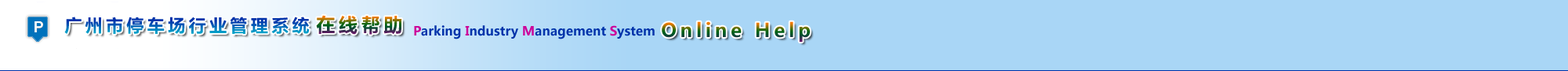
<style>
.page{position:relative;width:1568px;height:71px;background:#a9d6f6}
.page>*{position:absolute;margin:0}
.t1{font:17.3px "MicrosoftYaHei";letter-spacing:0.2em}
.t2{font:18.8px "MicrosoftYaHei";letter-spacing:0.2em}
</style>
<div class="page">
<p class="t1" style="left:64px;top:16px;width:246px;height:18px">广州市停车场行业管理系统</p>
<p class="t2" style="left:316px;top:15px;width:86px;height:19px">在线帮助</p>
<p class="t2" style="left:662px;top:21px;width:148px;height:21px">Online Help</p>
</div>
